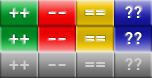
<style>
.page{position:relative;width:152px;height:78px}
.page>*{position:absolute;margin:0}
.t1{font:17px "DIN-Bold";color:#ffffff}
.t2{font:20px "DIN-Medium";color:#ffffff}
.t3{font:24px "DIN-Medium";color:#ffffff}
.t4{font:24px "DIN-Medium"}
.t5{font:20px "DIN-Medium";color:#cccccc}
.t6{font:24px "DIN-Medium";color:#cccccc}
.t7{font:17px "DIN-Bold";color:#cccccc}
</style>
<div class="page">
<p class="t1" style="left:125px;top:6px;width:17px;height:12px">??</p>
<p class="t2" style="left:9px;top:8px;width:20px;height:10px">++</p>
<p class="t3" style="left:48px;top:12px;width:18px;height:2px">--</p>
<p class="t2" style="left:85px;top:10px;width:20px;height:5px">==</p>
<p class="t2" style="left:9px;top:34px;width:20px;height:10px">++</p>
<p class="t4" style="left:48px;top:38px;width:18px;height:2px">--</p>
<p class="t2" style="left:85px;top:36px;width:20px;height:5px">==</p>
<p class="t1" style="left:125px;top:32px;width:17px;height:12px">??</p>
<p class="t5" style="left:9px;top:60px;width:20px;height:10px">++</p>
<p class="t6" style="left:48px;top:64px;width:18px;height:2px">--</p>
<p class="t5" style="left:85px;top:62px;width:20px;height:5px">==</p>
<p class="t7" style="left:125px;top:58px;width:17px;height:12px">??</p>
</div>
